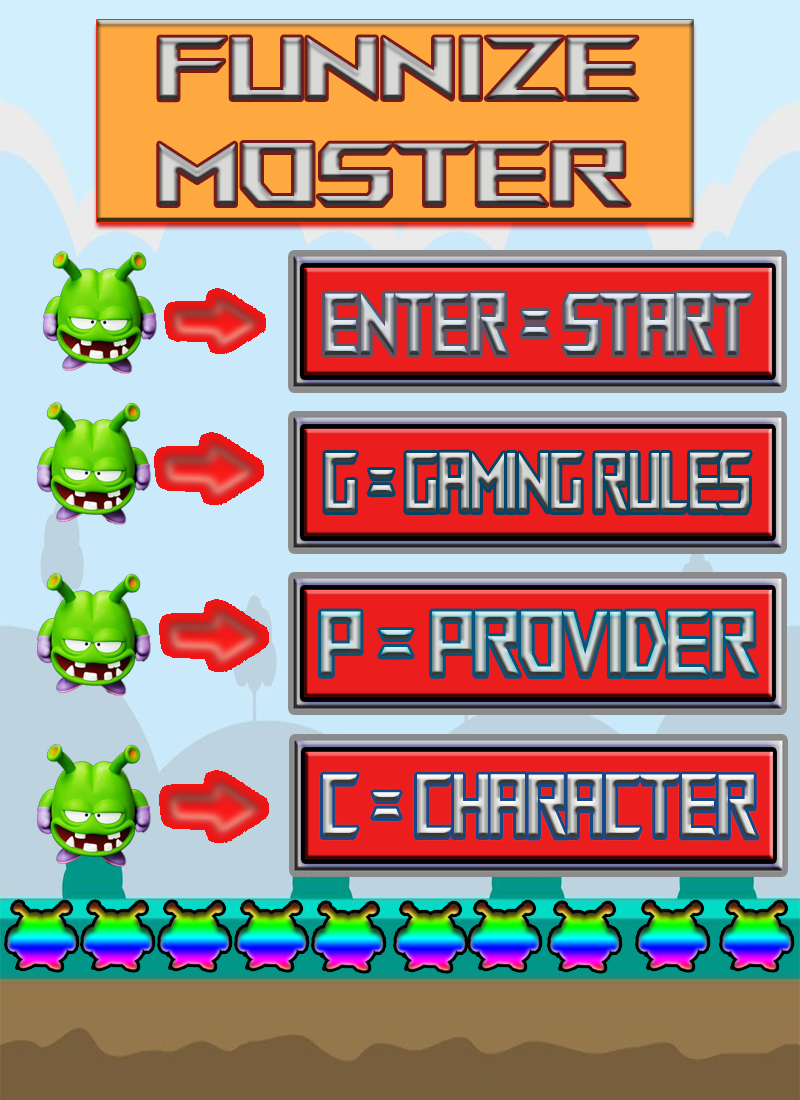
<style>
.page{position:relative;width:800px;height:1100px}
.page>*{position:absolute;margin:0}
.t1{font:88px "ROGFonts-Regular"}
.t2{font:87.7px "ROGFonts-Regular";scale:0.48 1}
.t3{font:84.2px "ROGFonts-Regular";scale:0.44 1}
.t4{font:91.9px "ROGFonts-Regular";scale:0.55 1}
.t5{font:89.4px "ROGFonts-Regular";scale:0.48 1}
</style>
<div class="page">
<p class="t1" style="left:159px;top:37px;width:478px;height:168px">FUNNIZE<br>MOSTER</p>
<p class="t2" style="left:325px;top:293px;width:427px;height:63px">ENTER = START</p>
<p class="t3" style="left:325px;top:452px;width:425px;height:61px">G = GAMING RULES</p>
<p class="t4" style="left:321px;top:611px;width:436px;height:66px">P = PROVIDER</p>
<p class="t5" style="left:323px;top:774px;width:434px;height:64px">C = CHARACTER</p>
</div>
